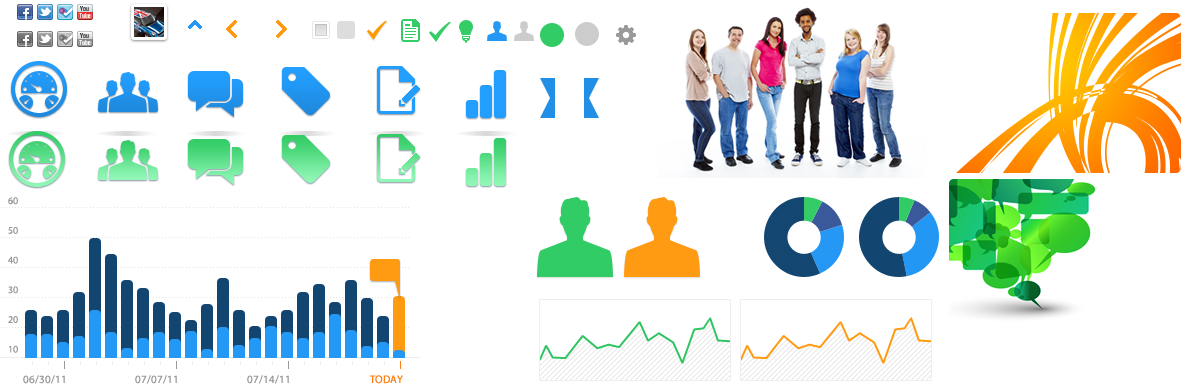
<style>
.page{position:relative;width:1188px;height:392px;background:#ffffff}
.page>*{position:absolute;margin:0}
.t1{font:10px/29.7px "MyriadPro-Regular";color:#999999}
.t2{font:11px "MyriadPro-Regular";color:#999999}
.t3{font:11px "MyriadPro-Regular";color:#fe7f13}
</style>
<div class="page">
<p class="t1" style="left:8px;top:197px;width:10px;height:156px;text-align:right">60<br>50<br>40<br>30<br>20<br>10</p>
<p class="t2" style="left:23px;top:375px;width:42px;height:9px">06/30/11</p>
<p class="t2" style="left:135px;top:375px;width:42px;height:9px">07/07/11</p>
<p class="t2" style="left:247px;top:375px;width:42px;height:9px">07/14/11</p>
<p class="t3" style="left:369px;top:375px;width:34px;height:9px">TODAY</p>
</div>
